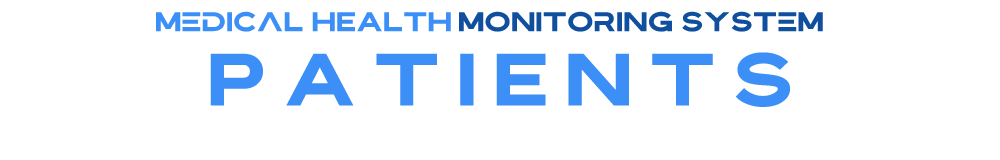
<style>
.page{position:relative;width:1000px;height:160px;background:#ffffff}
.page>*{position:absolute;margin:0}
.t1{font:23.8px "Bristone";color:#3c8ff6;scale:1.05 1}
.t2{font:23.8px "Bristone";color:#0f4f9d;scale:1.05 1}
.t3{font:65.3px "Bristone";letter-spacing:0.24em;color:#3c8ff6;scale:1.05 1}
</style>
<div class="page">
<p class="t1" style="left:156px;top:11px;width:295px;height:21px">medical HEALTH</p>
<p class="t2" style="left:459px;top:11px;width:364px;height:21px">monitoring system</p>
<p class="t3" style="left:210px;top:52px;width:580px;height:55px">PATIENTS</p>
</div>
